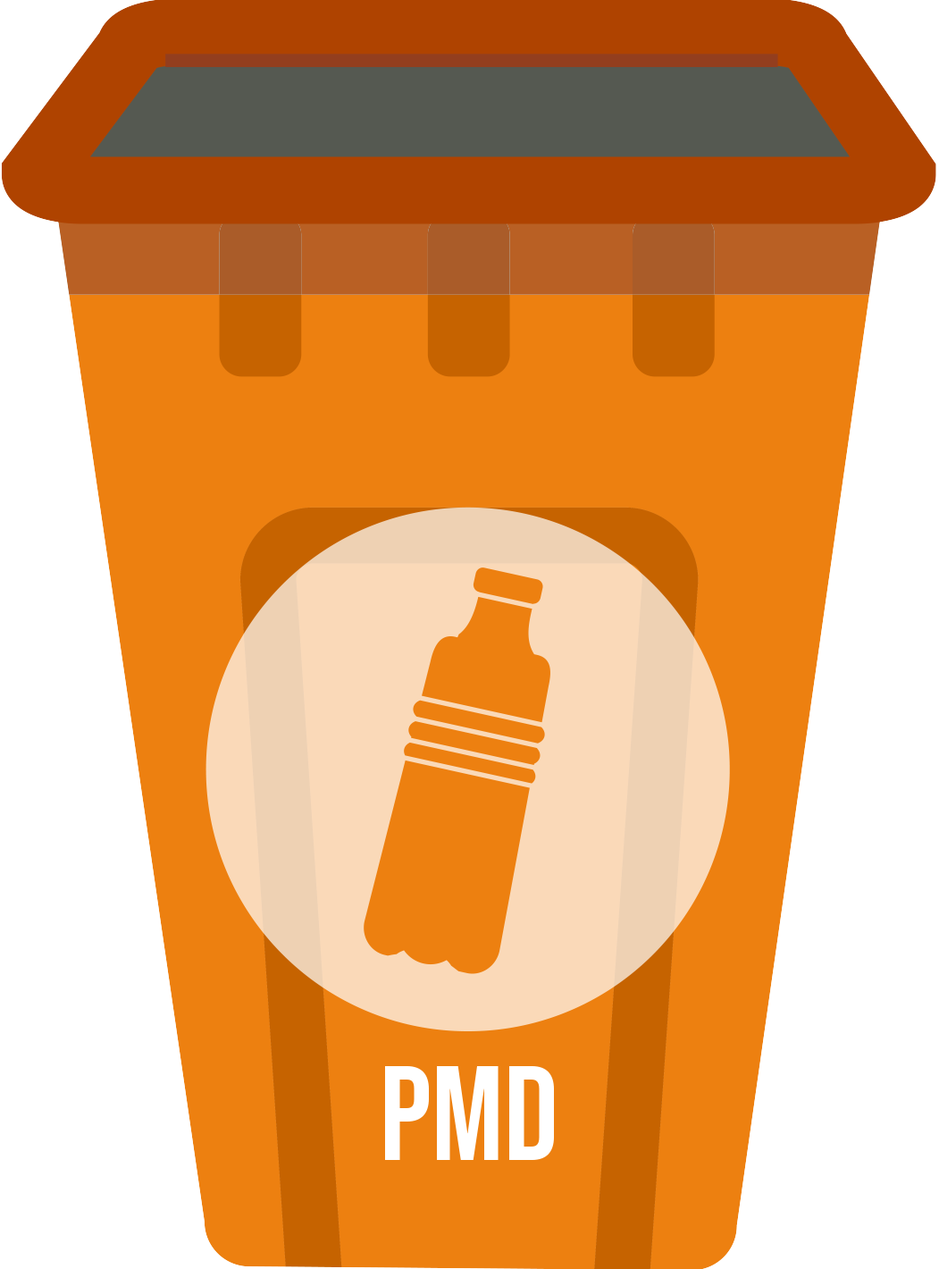
<style>
.page{position:relative;width:939px;height:1269px;background:#ed8010}
.page>*{position:absolute;margin:0}
.t1{font:134.1px "BebasNeue-Regular";color:#ffffff}
</style>
<div class="page">
<p class="t1" style="left:385px;top:1066px;width:169px;height:94px">PMD</p>
</div>
